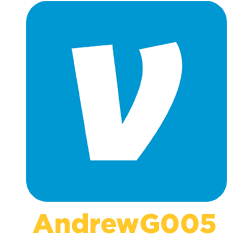
<style>
.page{position:relative;width:250px;height:250px;background:#0098d2}
.page>*{position:absolute;margin:0}
.t1{font:27px "Gotham-Black";color:#ffc729}
</style>
<div class="page">
<p class="t1" style="left:32px;top:213px;width:184px;height:21px">AndrewG005</p>
</div>
